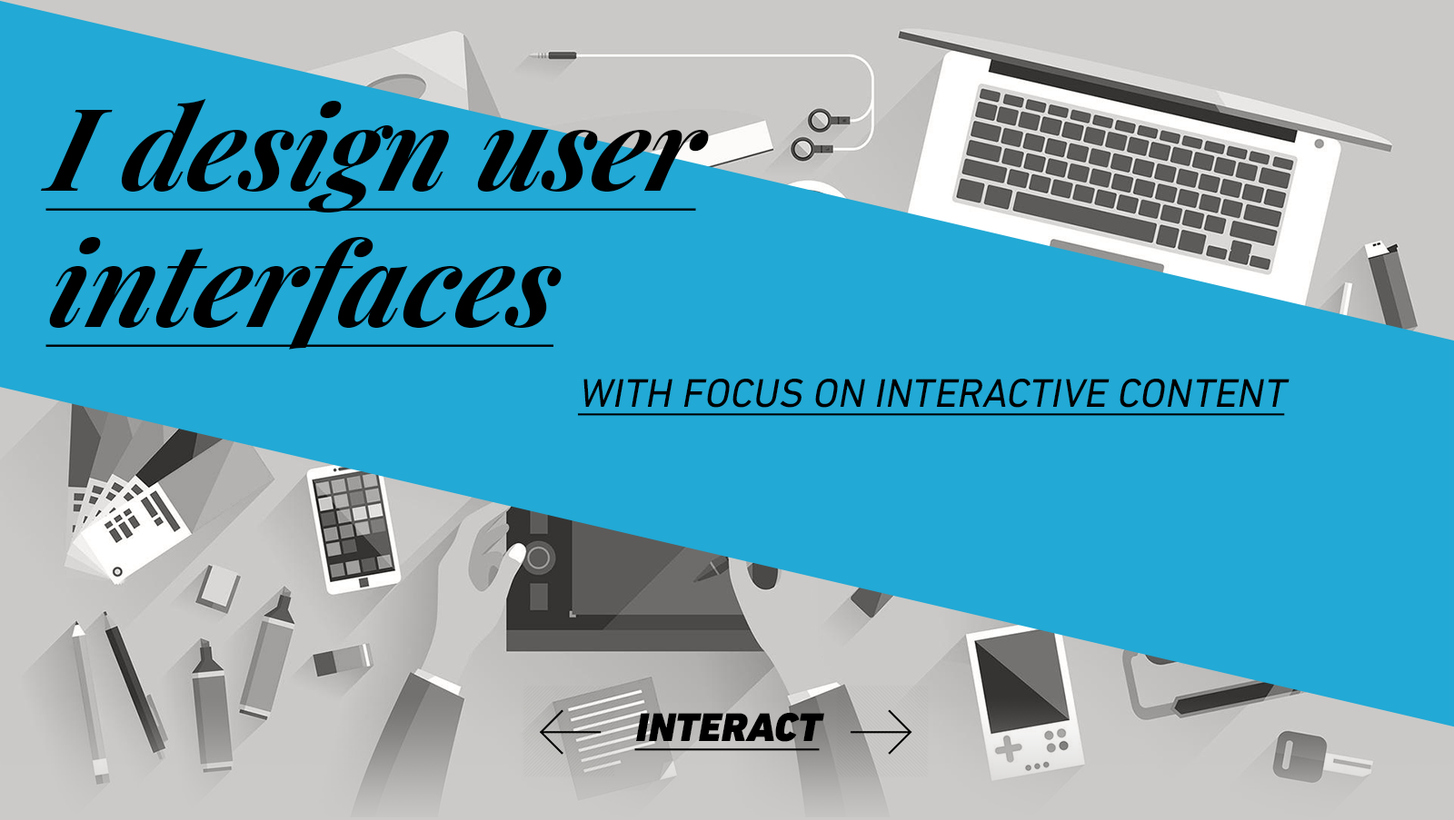
<style>
.page{position:relative;width:1454px;height:820px;background:#22a9d5}
.page>*{position:absolute;margin:0}
.t1{font:113.6px "PlayfairDisplay-BoldItalic";color:#000000;font-style:italic;text-decoration:underline}
.t2{font:40.9px "DINNextLTPro-Regular";color:#000000;font-style:italic;text-decoration:underline}
.t3{font:40.9px "DINNextLTPro-Black";color:#000000;font-style:italic;text-decoration:underline}
</style>
<div class="page">
<p class="t1" style="left:40px;top:98px;width:669px;height:252px">I design user<br>interfaces</p>
<p class="t2" style="left:577px;top:379px;width:712px;height:37px">WITH FOCUS ON INTERACTIVE CONTENT</p>
<p class="t3" style="left:634px;top:712px;width:190px;height:39px">INTERACT</p>
</div>
